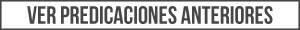
<style>
.page{position:relative;width:300px;height:30px;background:#ffffff}
.page>*{position:absolute;margin:0}
.t1{font:25px "BebasNeue";color:#464646}
</style>
<div class="page">
<p class="t1" style="left:27px;top:6px;width:246px;height:18px">ver predicaciones anteriores</p>
</div>
